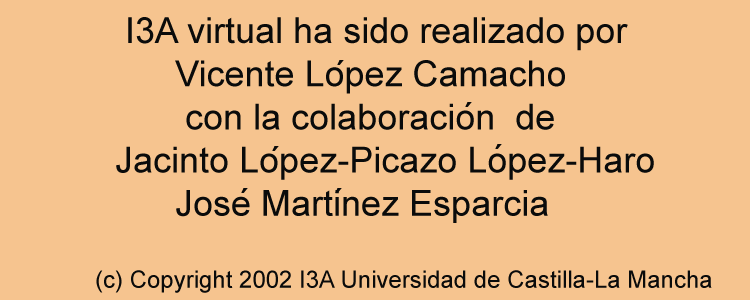
<style>
.page{position:relative;width:750px;height:300px;background:#f6c48f}
.page>*{position:absolute;margin:0}
.t1{font:36px "ArialMT";color:#0a0b0b}
.t2{font:24px "ArialMT";color:#0a0b0b}
</style>
<div class="page">
<p class="t1" style="left:96px;top:17px;width:616px;height:276px">I3A virtual ha sido realizado por <br>        Vicente Lopez Camacho<br>         con la colaboracion  de <br>  Jacinto Lopez-Picazo Lopez-Haro <br>        Jose Martinez Esparcia<br><br><span class="t2">(c) Copyright 2002 I3A Universidad de Castilla-La Mancha</span></p>
</div>
